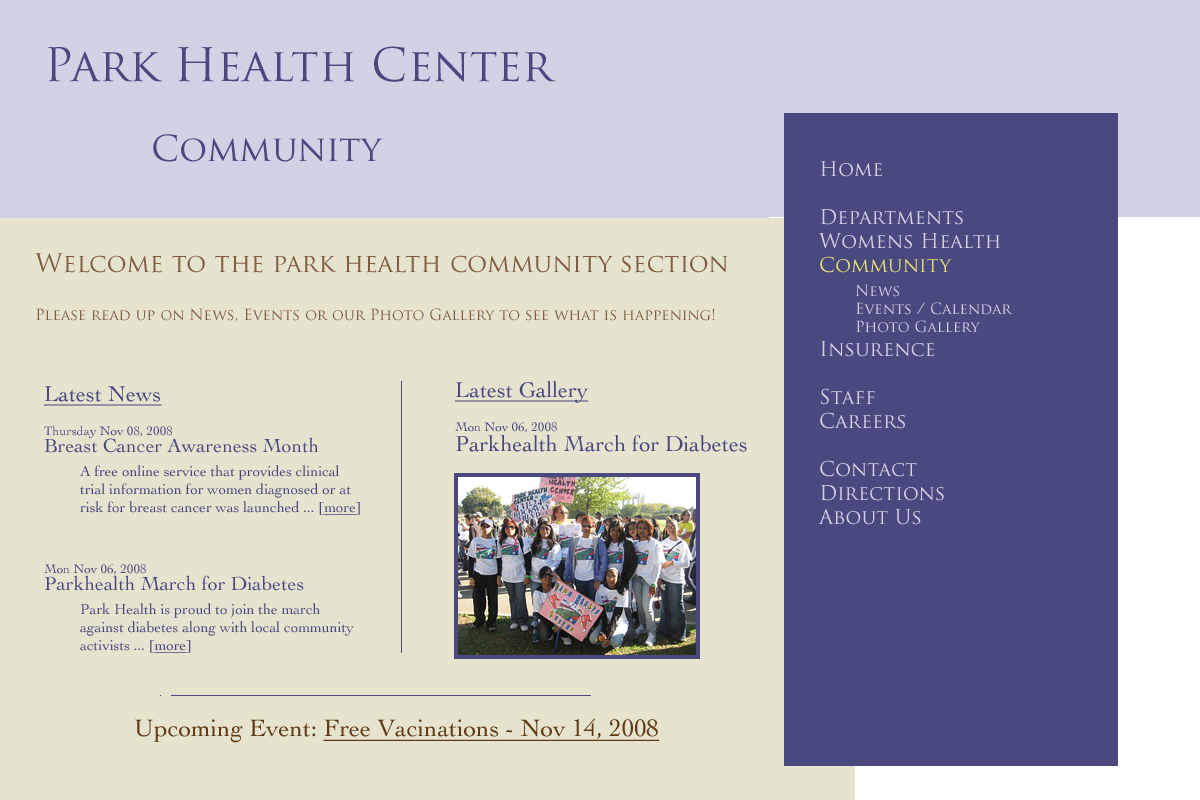
<style>
.page{position:relative;width:1200px;height:800px;background:#e6e3cf}
.page>*{position:absolute;margin:0}
.t1{font:45px "TrajanPro-Regular";color:#494980}
.t2{font:35px "TrajanPro-Regular";color:#494980}
.t3{font:20px "TrajanPro-Regular";color:#d2d2e6}
.t4{font:20px "TrajanPro-Regular";color:#e6e073}
.t5{font:15px "TrajanPro-Regular";color:#d2d2e6}
.t6{font:15px "TrajanPro-Regular";color:#805d40}
.t7{font:25px "TrajanPro-Regular";color:#805d40}
.t8{font:15px "Cochin";color:#494980}
.t9{font:22.5px "Cochin";color:#494980;text-decoration:underline}
.t10{font:22.5px "Cochin";color:#494980}
.t11{font:20px "Cochin";color:#494980}
.t12{font:15px "Cochin";color:#494980;text-decoration:underline}
.t13{font:25px "Cochin";color:#603913;text-decoration:underline}
.t14{font:25px "Cochin";color:#603913}
</style>
<div class="page">
<p class="t1" style="left:48px;top:46px;width:508px;height:36px">Park Health Center</p>
<p class="t2" style="left:153px;top:134px;width:230px;height:28px">Community</p>
<p class="t3" style="left:818px;top:161px;width:195px;height:364px">Home<br><br>Departments<br>Womens Health<br><span class="t4">Community<br> </span><span class="t5">News<br> Events / Calendar<br> Photo Gallery<br></span>Insurence<br><br>Staff<br>Careers<br><br>Contact<br>Directions<br>About Us</p>
<p class="t6" style="left:34px;top:253px;width:694px;height:69px"><span class="t7">Welcome to the park health community section<br><br></span>Please read up on News, Events or our Photo Gallery to see what is happening!</p>
<p class="t8" style="left:44px;top:386px;width:316px;height:267px"><span class="t9">Latest News<br></span><span class="t10">Thursday Nov 08, 2008<br></span><span class="t11">Breast Cancer Awareness Month<br> </span>A free online service that provides clinical<br> trial information for women diagnosed or at<br> risk for breast cancer was launched ... [<span class="t12">more</span>]<br><br><span class="t10">Mon Nov 06, 2008<br></span><span class="t11">Parkhealth March for Diabetes<br> </span>Park Health is proud to join the march <br> against diabetes along with local community<br> activists ... [<span class="t12">more</span>]</p>
<p class="t10" style="left:455px;top:381px;width:292px;height:71px"><span class="t9">Latest Gallery<br></span>Mon Nov 06, 2008<br>Parkhealth March for Diabetes</p>
<p class="t13" style="left:135px;top:718px;width:525px;height:25px"><span class="t14">Upcoming Event: </span>Free Vacinations - Nov 14, 2008</p>
</div>
